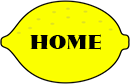
<style>
.page{position:relative;width:130px;height:84px;background:#fbff00}
.page>*{position:absolute;margin:0}
.t1{font:20px "Vogue";color:#000000}
</style>
<div class="page">
<p class="t1" style="left:30px;top:34px;width:71px;height:16px">HOME</p>
</div>
